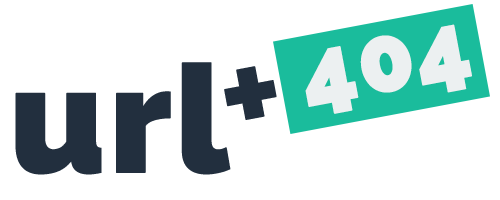
<style>
.page{position:relative;width:500px;height:200px;background:#ffffff}
.page>*{position:absolute;margin:0}
.t1{font:92.3px "Raleway-Black";color:#ecf0f1;font-weight:bold}
.t2{font:150px "Raleway-Black";color:#222f3e;font-weight:bold}
.t3{font:150px "Raleway-Bold";color:#222f3e;font-weight:bold}
</style>
<div class="page">
<p class="t1" style="left:305px;top:24px;width:167px;height:90px;rotate:-11deg">404</p>
<p class="t2" style="left:15px;top:62px;width:216px;height:113px">url</p>
<p class="t3" style="left:224px;top:66px;width:53px;height:54px;rotate:-11deg">+</p>
</div>
